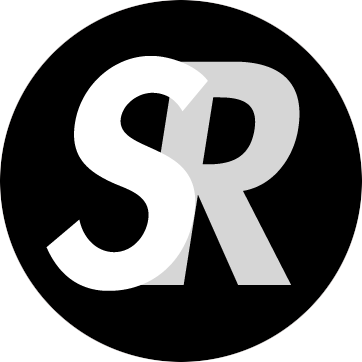
<style>
.page{position:relative;width:362px;height:362px;background:#000000}
.page>*{position:absolute;margin:0}
.t1{font:296px "FuturaStd-HeavyOblique";color:#ffffff}
.t2{font:296px "FuturaStd-HeavyOblique";color:#d6d6d6}
</style>
<div class="page">
<p class="t1" style="left:46px;top:56px;width:162px;height:235px">S</p>
<p class="t2" style="left:140px;top:61px;width:160px;height:224px">R</p>
</div>
